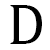
<style>
.page{position:relative;width:50px;height:50px;background:#ffffff}
.page>*{position:absolute;margin:0}
.t1{font:58.3px "CambriaMath";color:#000000}
</style>
<div class="page">
<p class="t1" style="left:10px;top:5px;width:32px;height:39px">D</p>
</div>
